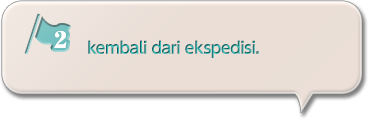
<style>
.page{position:relative;width:368px;height:120px;background:#eaded6}
.page>*{position:absolute;margin:0}
.t1{font:16px "UDShinGoPro-DeBold";letter-spacing:-0.04em}
</style>
<div class="page">
<p class="t1" style="left:88px;top:40px;width:171px;height:18px">kembali dari ekspedisi.</p>
</div>
